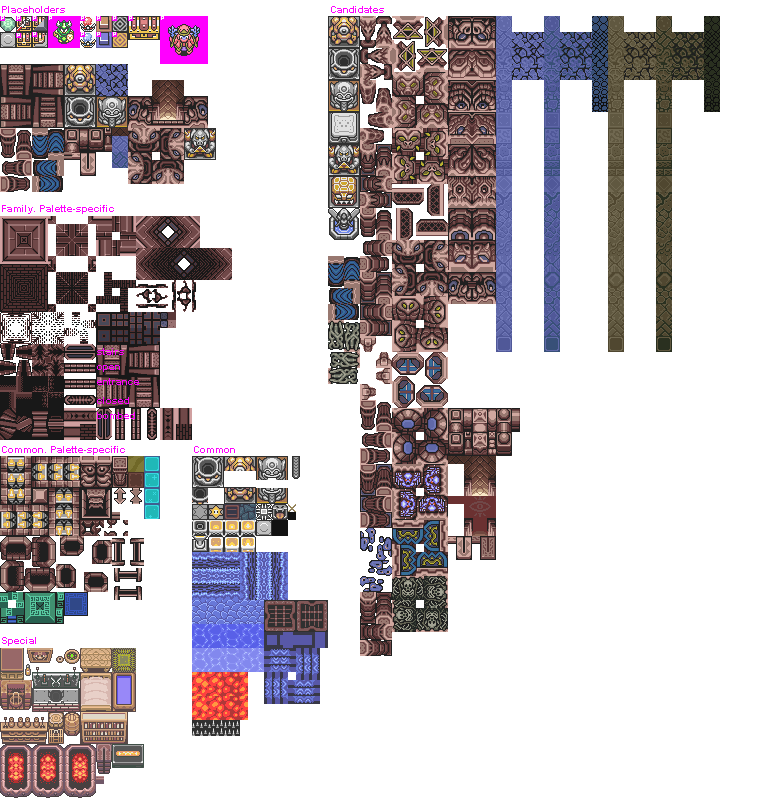
<style>
.page{position:relative;width:780px;height:800px;background:#ffffff}
.page>*{position:absolute;margin:0}
.t1{font:10px "Arial-BoldMT";color:#ff00ff}
.t2{font:10px/3.8px "Arial-BoldMT";color:#ff00ff}
</style>
<div class="page">
<p class="t1" style="left:2px;top:6px;width:63px;height:7px">Placeholders</p>
<p class="t1" style="left:331px;top:6px;width:53px;height:7px">Candidates</p>
<p class="t1" style="left:2px;top:205px;width:112px;height:9px">Family. Palette-specific</p>
<p class="t2" style="left:97px;top:348px;width:42px;height:71px">stairs<br><br><br><br>open<br><br><br><br>entrance<br><br><br><br><br>closed<br><br><br><br>bombed</p>
<p class="t1" style="left:2px;top:446px;width:123px;height:9px">Common. Palette-specific</p>
<p class="t1" style="left:194px;top:446px;width:41px;height:7px">Common</p>
<p class="t1" style="left:2px;top:637px;width:34px;height:9px">Special</p>
</div>
